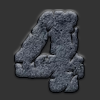
<style>
.page{position:relative;width:100px;height:100px;background:#333333}
.page>*{position:absolute;margin:0}
.t1{font:100px "JFRockSolid"}
</style>
<div class="page">
<p class="t1" style="left:15px;top:11px;width:69px;height:81px">4</p>
</div>
